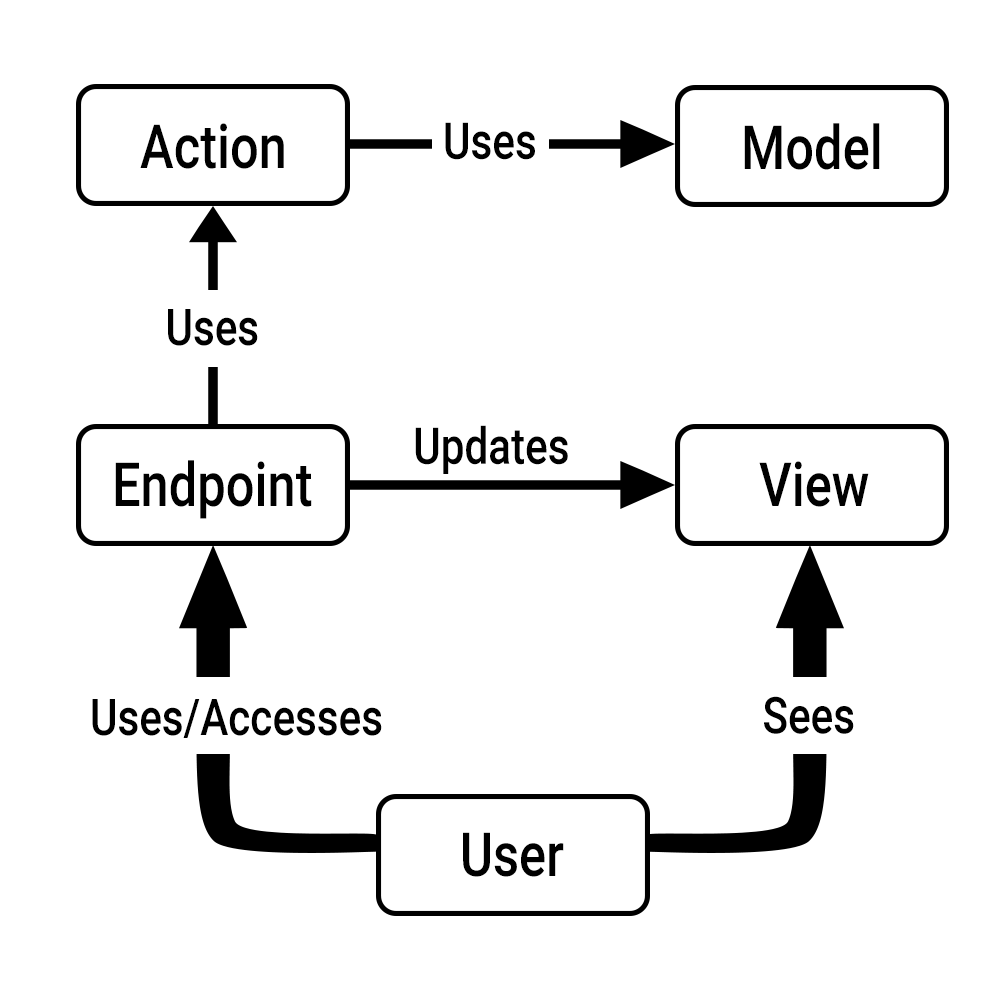
<style>
.page{position:relative;width:1000px;height:1000px;background:#ffffff}
.page>*{position:absolute;margin:0}
.t1{font:61px "Roboto-Medium";color:#000000;scale:0.83 1}
.t2{font:50.8px "Roboto-Medium";color:#000000;scale:0.83 1}
</style>
<div class="page">
<p class="t1" style="left:140px;top:123px;width:144px;height:46px">Action</p>
<p class="t2" style="left:445px;top:122px;width:90px;height:38px">Uses</p>
<p class="t1" style="left:744px;top:123px;width:136px;height:47px">Model</p>
<p class="t2" style="left:168px;top:309px;width:90px;height:37px">Uses</p>
<p class="t2" style="left:415px;top:425px;width:153px;height:49px">Updates</p>
<p class="t1" style="left:115px;top:460px;width:197px;height:59px">Endpoint</p>
<p class="t1" style="left:759px;top:461px;width:110px;height:46px">View</p>
<p class="t2" style="left:92px;top:699px;width:290px;height:39px">Uses/Accesses</p>
<p class="t2" style="left:764px;top:696px;width:90px;height:38px">Sees</p>
<p class="t1" style="left:463px;top:832px;width:101px;height:45px">User</p>
</div>
